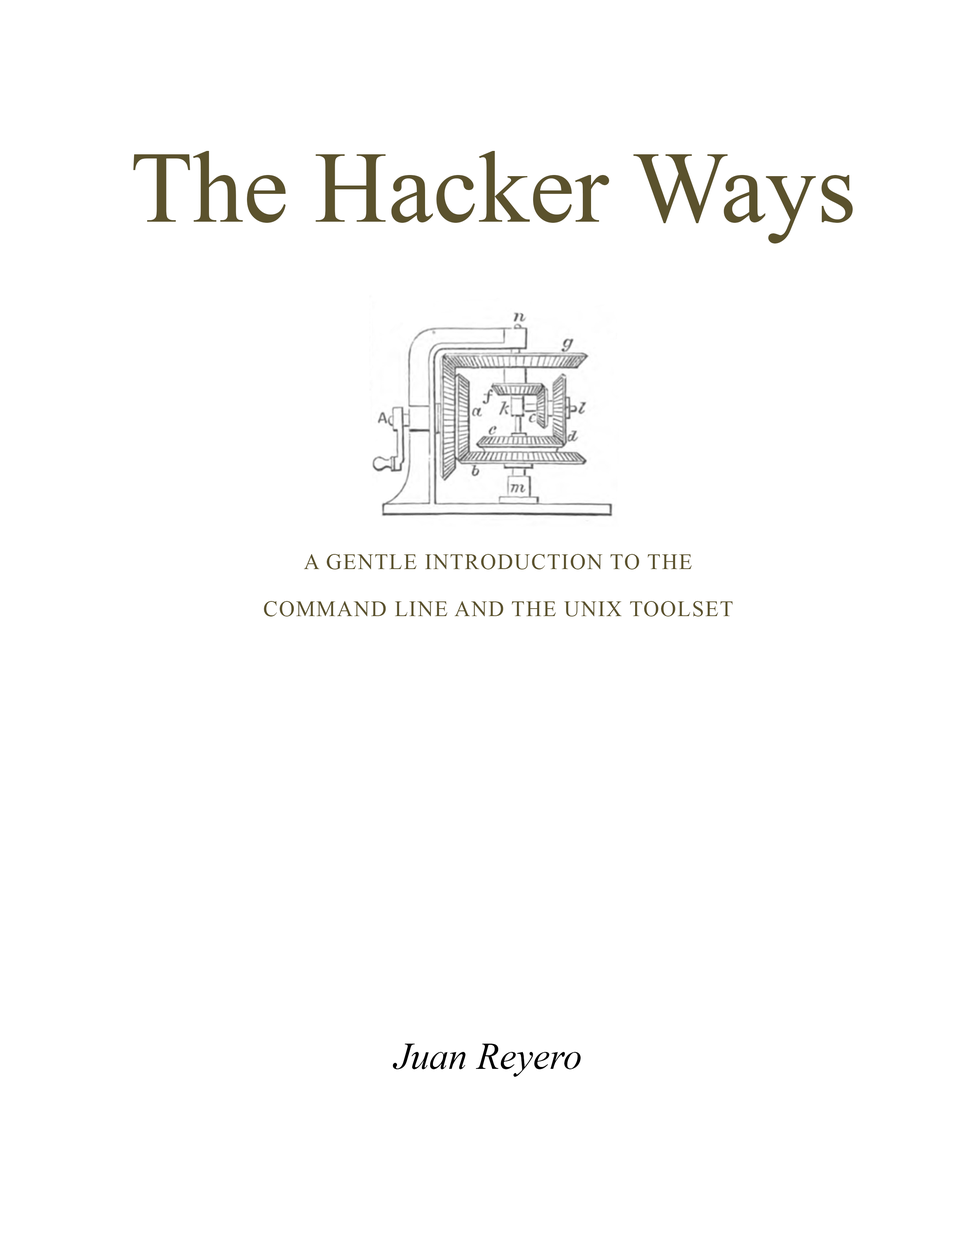
<style>
.page{position:relative;width:960px;height:1242px;background:#ffffff}
.page>*{position:absolute;margin:0}
.t1{font:102px "TimesNewRomanPSMT";color:#5b522d}
.t2{font:22px/47.1px "TimesNewRomanPSMT";letter-spacing:0.05em;color:#5b522d}
.t3{font:37.6px "TimesNewRomanPS-ItalicMT";color:#000000}
</style>
<div class="page">
<p class="t1" style="left:133px;top:151px;width:720px;height:93px">The Hacker Ways</p>
<p class="t2" style="left:264px;top:554px;width:469px;height:63px;text-align:center">A GENTLE INTRODUCTION TO THE<br>COMMAND LINE AND THE UNIX TOOLSET</p>
<p class="t3" style="left:393px;top:1044px;width:188px;height:33px">Juan Reyero</p>
</div>
